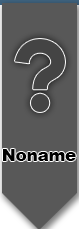
<style>
.page{position:relative;width:79px;height:229px;background:#585858}
.page>*{position:absolute;margin:0}
.t1{font:16.7px "Arial-Black";letter-spacing:-0.01em;color:#000000}
</style>
<div class="page">
<p class="t1" style="left:3px;top:149px;width:73px;height:12px">Noname</p>
</div>
